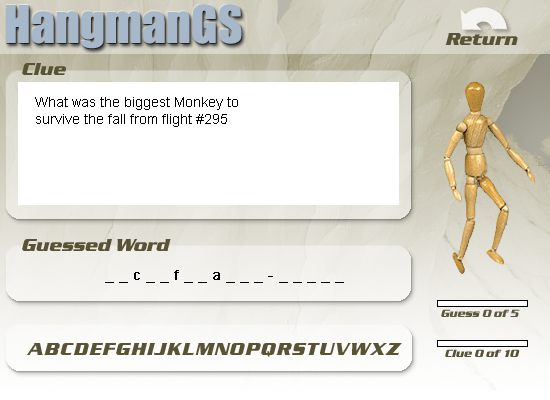
<style>
.page{position:relative;width:550px;height:400px;background:#ffffff}
.page>*{position:absolute;margin:0}
.t1{font:48px "Impact";color:#a6b8c9}
.t2{font:18px "SerpentineD-BoldItal";color:#595335}
.t3{font:14px "ArialMT";color:#000000}
.t4{font:14px "ArialMT";color:#000000;font-weight:bold}
.t5{font:11px "SerpentineD-BoldItal";color:#595335}
.t6{font:18px "SerpentineD-BoldItal";letter-spacing:0.075em;color:#595335}
</style>
<div class="page">
<p class="t1" style="left:6px;top:4px;width:236px;height:45px">HangmanGS</p>
<p class="t2" style="left:445px;top:33px;width:73px;height:12px">Return</p>
<p class="t2" style="left:22px;top:63px;width:44px;height:12px">Clue</p>
<p class="t3" style="left:35px;top:97px;width:203px;height:30px">What was the biggest Monkey to <br>survive the fall from flight #295</p>
<p class="t2" style="left:22px;top:239px;width:149px;height:12px">Guessed Word</p>
<p class="t4" style="left:105px;top:270px;width:239px;height:13px">_ _ c _ _ f _ _ a _ _ _ - _ _ _ _ _</p>
<p class="t5" style="left:441px;top:309px;width:79px;height:8px;opacity:0.96">Guess 0 of 5</p>
<p class="t6" style="left:26px;top:343px;width:376px;height:14px">ABCDEFGHIJKLMNOPQRSTUVWXZ</p>
<p class="t5" style="left:445px;top:349px;width:75px;height:8px">Clue 0 of 10</p>
</div>
